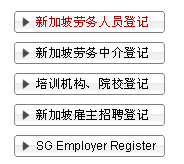
<style>
.page{position:relative;width:184px;height:164px;background:#ffffff}
.page>*{position:absolute;margin:0}
.t1{font:12px "SimSun";letter-spacing:0.05em;color:#b10606}
.t2{font:12px "SimSun";letter-spacing:0.05em;color:#000000}
.t3{font:12px "ArialMT";letter-spacing:-0.01em;color:#000000}
</style>
<div class="page">
<p class="t1" style="left:36px;top:16px;width:112px;height:11px">新加坡劳务人员登记</p>
<p class="t2" style="left:36px;top:47px;width:112px;height:11px">新加坡劳务中介登记</p>
<p class="t2" style="left:36px;top:78px;width:112px;height:11px">培训机构、院校登记</p>
<p class="t2" style="left:36px;top:109px;width:112px;height:11px">新加坡雇主招聘登记</p>
<p class="t3" style="left:37px;top:141px;width:119px;height:11px">SG Employer Register</p>
</div>
